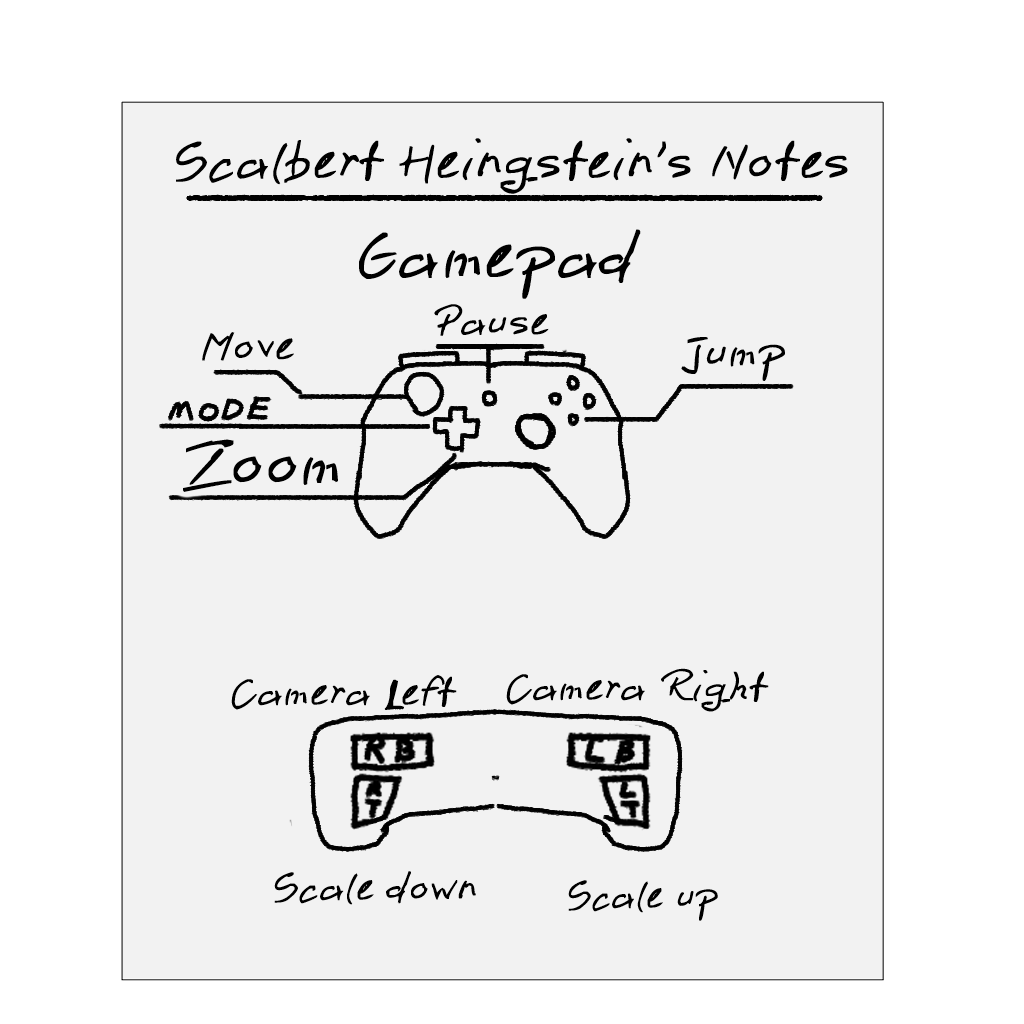
<style>
.page{position:relative;width:1024px;height:1024px;background:#f2f2f2}
.page>*{position:absolute;margin:0}
.t1{font:48px "pen2";color:#000000}
.t2{font:60px "pen2";color:#000000}
.t3{font:37.4px "pen2";color:#000000}
.t4{font:38.5px "pen2";color:#000000}
.t5{font:41.5px "pen2";color:#000000}
.t6{font:36px "pen2";color:#000000}
.t7{font:36px "pen2";color:#000000;scale:0.95 1}
</style>
<div class="page">
<p class="t1" style="left:176px;top:138px;width:672px;height:56px">Scalbert Heingstein’s Notes</p>
<p class="t2" style="left:359px;top:229px;width:282px;height:70px">Gamepad</p>
<p class="t3" style="left:434px;top:304px;width:115px;height:32px">Pause</p>
<p class="t4" style="left:202px;top:332px;width:92px;height:29px">Move</p>
<p class="t5" style="left:681px;top:337px;width:104px;height:44px">Jump</p>
<p class="t2" style="left:183px;top:439px;width:155px;height:53px">Zoom</p>
<p class="t6" style="left:231px;top:675px;width:226px;height:35px">Camera Left</p>
<p class="t6" style="left:506px;top:668px;width:263px;height:44px">Camera Right</p>
<p class="t6" style="left:274px;top:871px;width:202px;height:34px">Scale down</p>
<p class="t7" style="left:568px;top:880px;width:150px;height:41px">Scale up</p>
</div>
